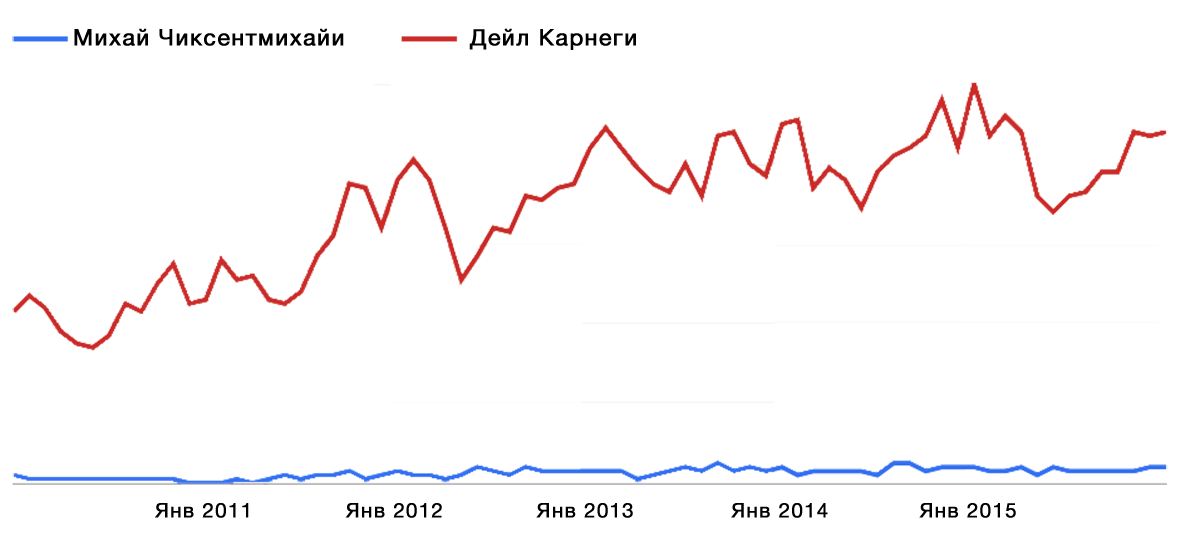
<style>
.page{position:relative;width:1200px;height:541px;background:#ffffff}
.page>*{position:absolute;margin:0}
.t1{font:22.6px "HelveticaNeue";letter-spacing:0.05em;color:#000000;font-weight:bold}
.t2{font:20.1px "HelveticaNeue";letter-spacing:0.05em;color:#000000;font-weight:bold}
</style>
<div class="page">
<p class="t1" style="left:74px;top:28px;width:270px;height:18px">Михай Чиксентмихайи</p>
<p class="t1" style="left:469px;top:28px;width:167px;height:22px">Дейл Карнеги</p>
<p class="t2" style="left:155px;top:503px;width:94px;height:15px">Янв 2011</p>
<p class="t2" style="left:345px;top:503px;width:97px;height:15px">Янв 2012</p>
<p class="t2" style="left:536px;top:503px;width:97px;height:15px">Янв 2013</p>
<p class="t2" style="left:731px;top:503px;width:97px;height:15px">Янв 2014</p>
<p class="t2" style="left:919px;top:503px;width:97px;height:15px">Янв 2015</p>
</div>
